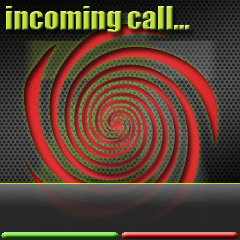
<style>
.page{position:relative;width:240px;height:240px}
.page>*{position:absolute;margin:0}
.t1{font:30px "Impact"}
</style>
<div class="page">
<p class="t1" style="left:6px;top:6px;width:184px;height:27px">incoming call...</p>
</div>
